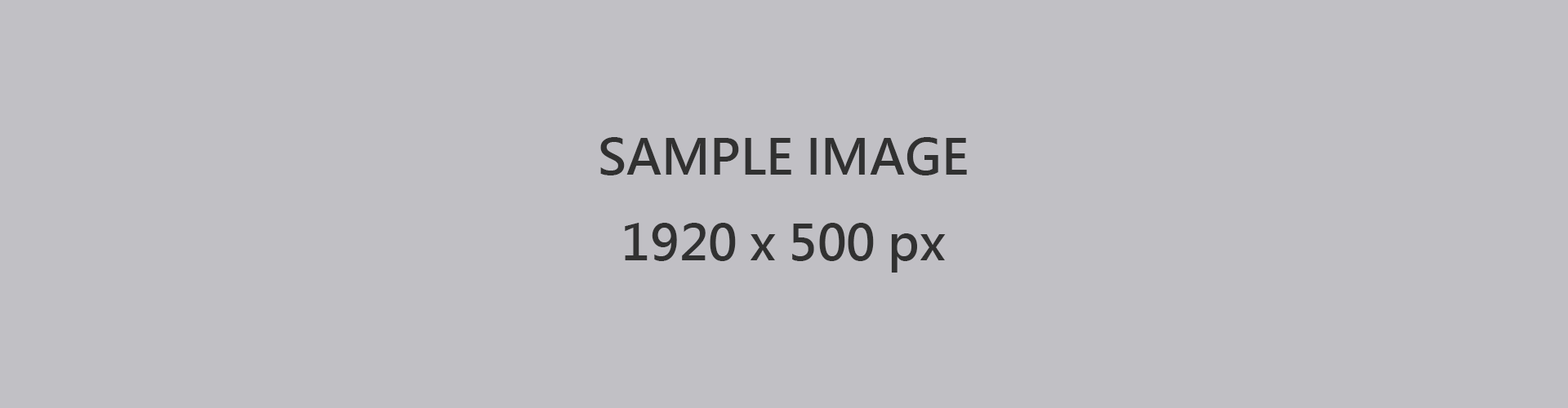
<style>
.page{position:relative;width:1568px;height:408px;background:#c1c0c5}
.page>*{position:absolute;margin:0}
.t1{font:49px "MicrosoftJhengHeiBold";color:#313131}
</style>
<div class="page">
<p class="t1" style="left:600px;top:137px;width:367px;height:136px;text-align:center">SAMPLE IMAGE<br>1920 x 500 px</p>
</div>
